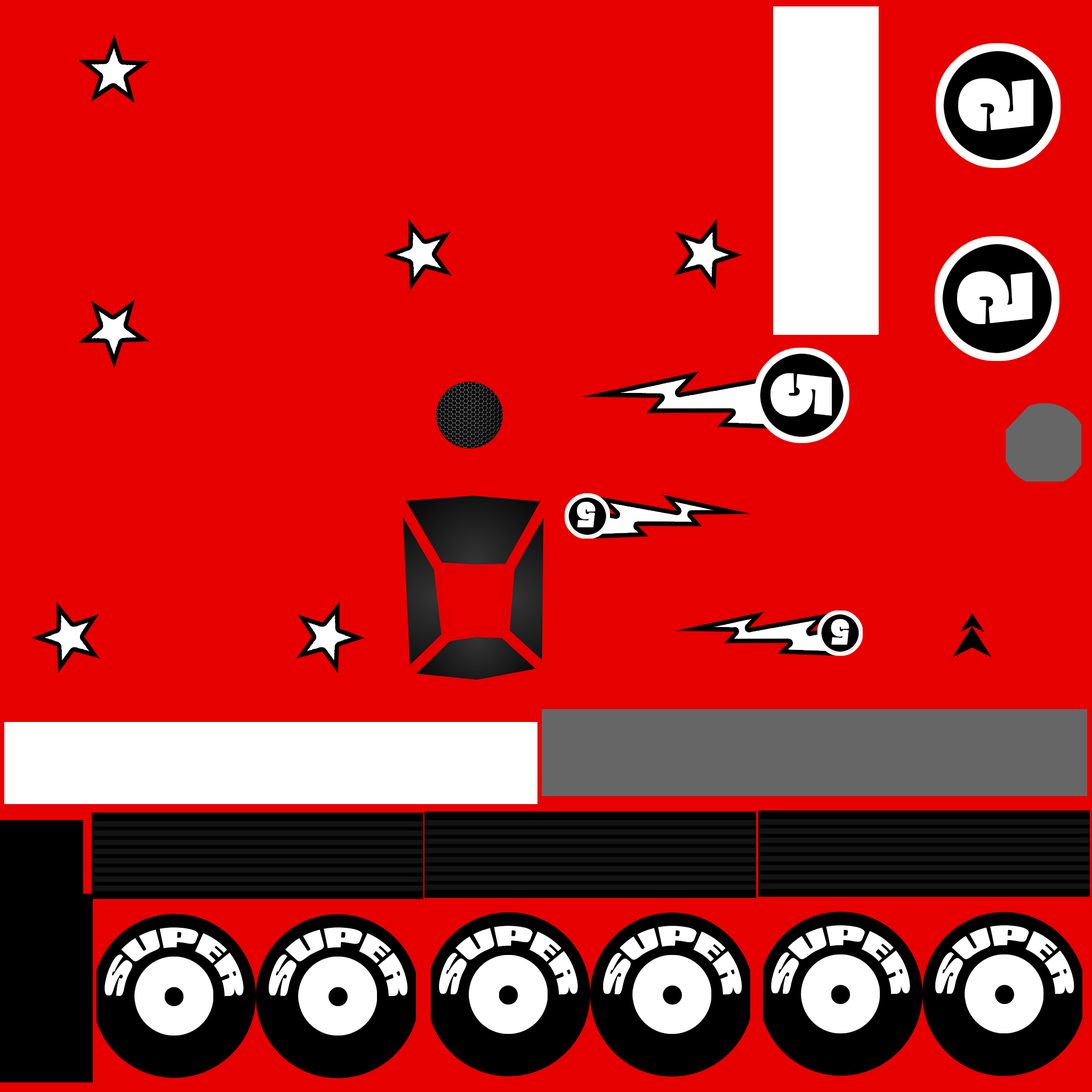
<style>
.page{position:relative;width:1092px;height:1092px;background:#e60000}
.page>*{position:absolute;margin:0}
.t1{font:101.7px "PoplarStd";color:#ffffff;font-variant:small-caps;scale:1.18 1}
.t2{font:83.2px "PoplarStd";color:#ffffff;font-variant:small-caps;scale:1.19 1}
.t3{font:34.9px "PoplarStd";color:#ffffff;font-variant:small-caps;scale:1.18 1}
.t4{font:34.5px "CompactaBT-Black";color:#ffffff;font-variant:small-caps}
</style>
<div class="page">
<p class="t1" style="left:958px;top:78px;width:76px;height:53px;rotate:-90deg">5</p>
<p class="t1" style="left:957px;top:271px;width:76px;height:53px;rotate:-90deg">5</p>
<p class="t2" style="left:770px;top:373px;width:62px;height:43px;rotate:90deg">5</p>
<p class="t3" style="left:577px;top:502px;width:19px;height:25px;rotate:180deg">5</p>
<p class="t3" style="left:831px;top:619px;width:18px;height:26px;rotate:180deg">5</p>
<p class="t4" style="left:105px;top:927px;width:139px;height:70px">super</p>
<p class="t4" style="left:269px;top:927px;width:139px;height:70px">super</p>
<p class="t4" style="left:439px;top:926px;width:139px;height:69px">super</p>
<p class="t4" style="left:603px;top:926px;width:139px;height:69px">super</p>
<p class="t4" style="left:771px;top:925px;width:139px;height:69px">super</p>
<p class="t4" style="left:935px;top:925px;width:139px;height:69px">super</p>
</div>
